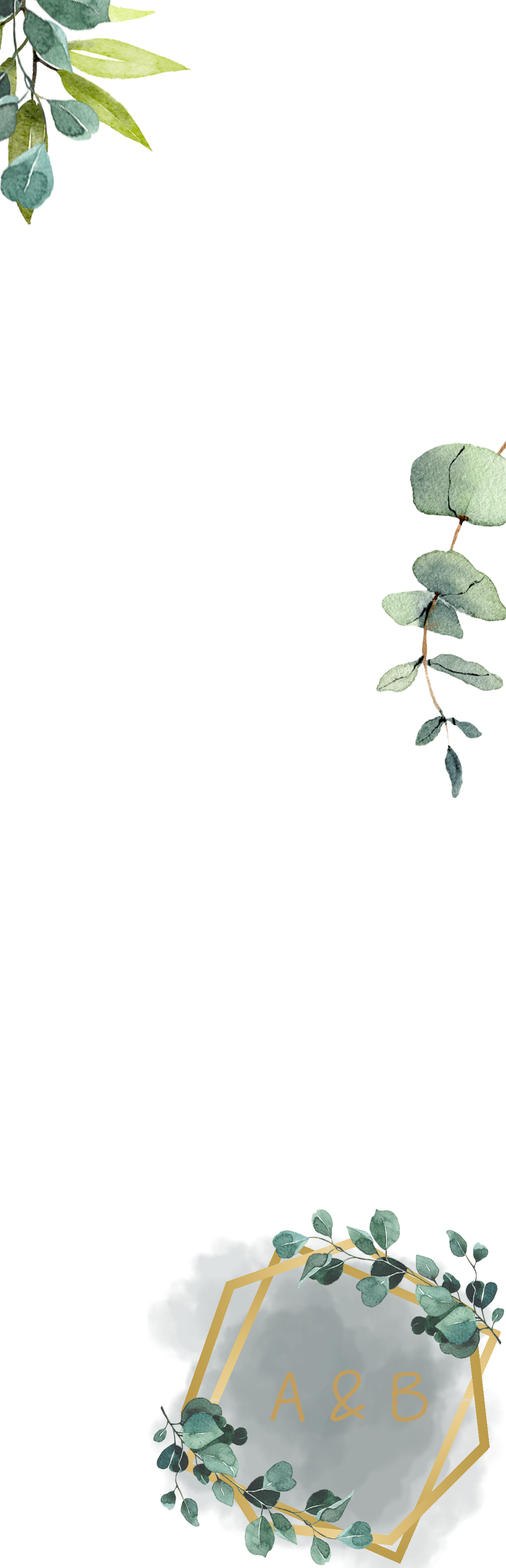
<style>
.page{position:relative;width:506px;height:1568px;background:#ffffff}
.page>*{position:absolute;margin:0}
.t1{font:81.7px "Maku-Regular";color:#c29e5e}
</style>
<div class="page">
<p class="t1" style="left:270px;top:1370px;width:158px;height:52px">A &amp; B</p>
</div>
